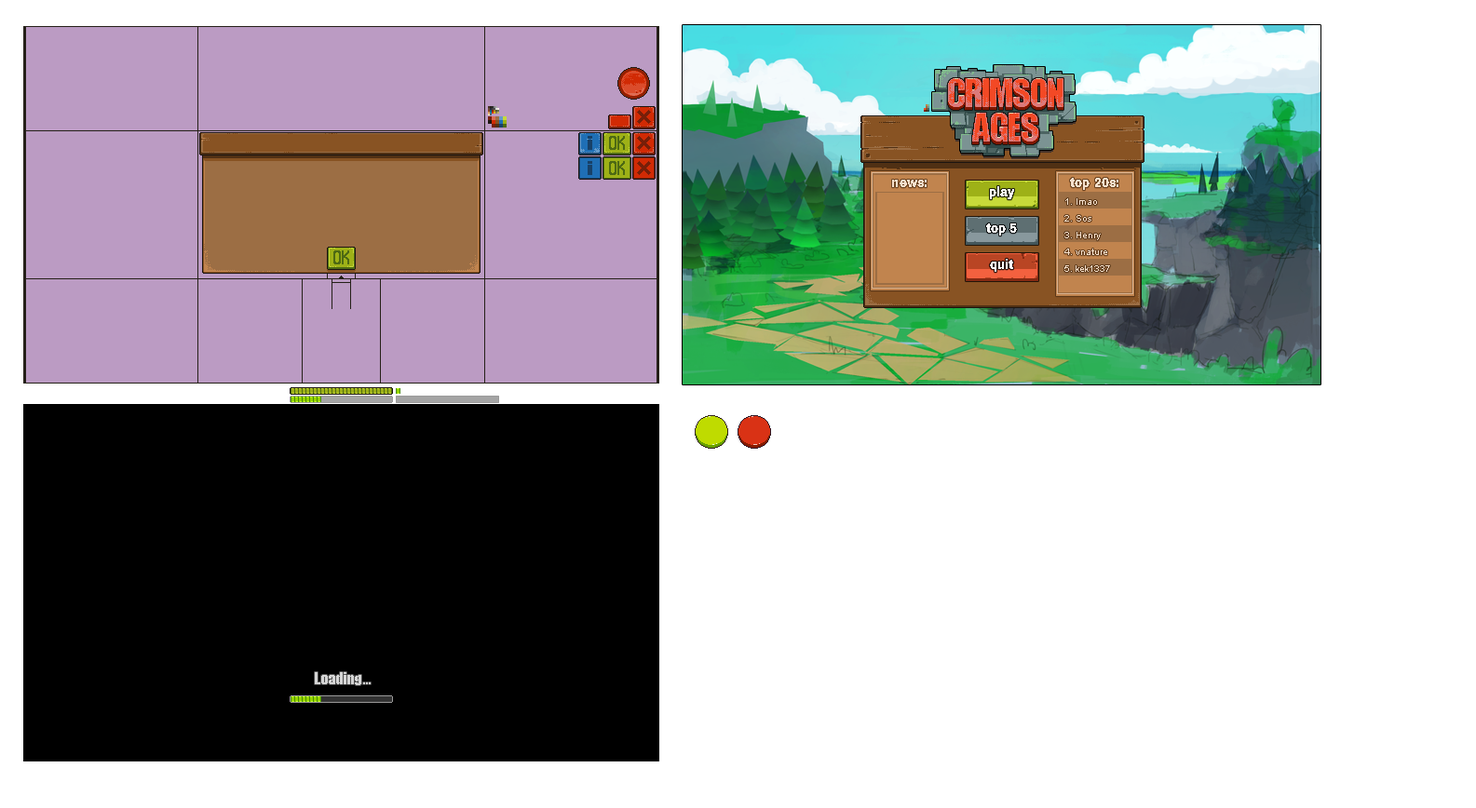
<style>
.page{position:relative;width:1476px;height:808px;background:#ffffff}
.page>*{position:absolute;margin:0}
.t1{font:14px "ArchivoBlack-Regular";letter-spacing:0.005em;color:#f6e0cc;scale:0.8 1}
.t2{font:14px "ArchivoBlack-Regular";letter-spacing:0.005em;color:#ffffff;scale:0.8 1}
.t3{font:9.3px "ArialMT";color:#f6e0cc}
</style>
<div class="page">
<p class="t1" style="left:892px;top:180px;width:34px;height:7px">news:</p>
<p class="t1" style="left:1070px;top:178px;width:48px;height:12px">top 20s:</p>
<p class="t2" style="left:990px;top:186px;width:24px;height:13px">play</p>
<p class="t3" style="left:1065px;top:198px;width:32px;height:7px">1. lmao</p>
<p class="t3" style="left:1064px;top:215px;width:27px;height:7px">2. Sos</p>
<p class="t2" style="left:986px;top:223px;width:31px;height:13px">top 5</p>
<p class="t3" style="left:1064px;top:232px;width:36px;height:8px">3. Henry</p>
<p class="t3" style="left:1064px;top:249px;width:43px;height:6px">4. vnature</p>
<p class="t2" style="left:990px;top:259px;width:23px;height:13px">quit</p>
<p class="t3" style="left:1064px;top:265px;width:46px;height:7px">5. kek1337</p>
</div>
